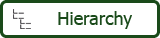
<style>
.page{position:relative;width:160px;height:38px;background:#ffffff}
.page>*{position:absolute;margin:0}
.t1{font:18px "Tahoma";color:#1a4a1a}
</style>
<div class="page">
<p class="t1" style="left:58px;top:11px;width:74px;height:18px">Hierarchy</p>
</div>
